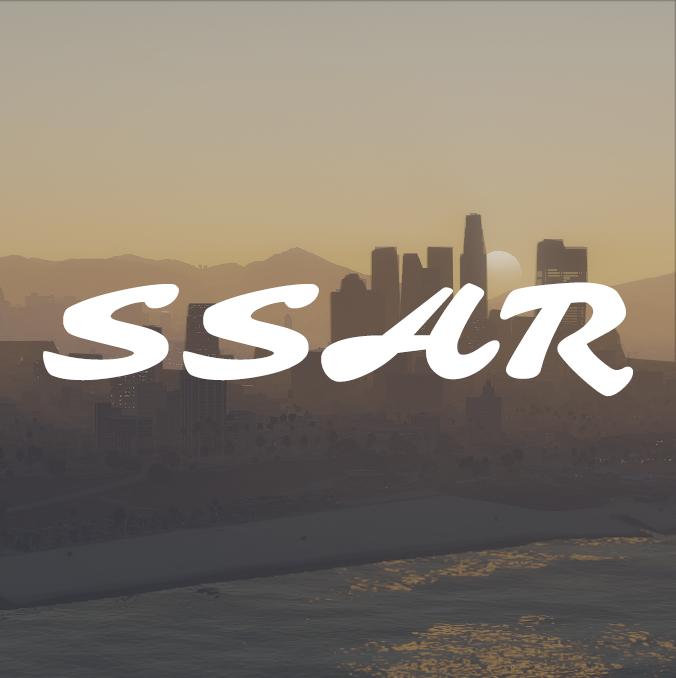
<style>
.page{position:relative;width:676px;height:678px}
.page>*{position:absolute;margin:0}
.t1{font:140px "Sarina-Regular";color:#ffffff}
</style>
<div class="page">
<p class="t1" style="left:43px;top:282px;width:590px;height:115px">SSAR</p>
</div>
